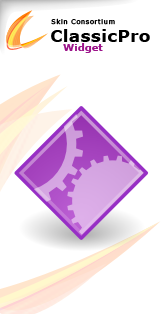
<style>
.page{position:relative;width:164px;height:314px;background:#ffffff}
.page>*{position:absolute;margin:0}
.t1{font:6.5px "Verdana";letter-spacing:0.1em;color:#010101}
.t2{font:17.4px "Verdana-Bold";color:#000000}
.t3{font:10px "Verdana-Bold";color:#9c148a}
</style>
<div class="page">
<p class="t1" style="left:51px;top:18px;width:64px;height:7px">Skin Consortium</p>
<p class="t2" style="left:51px;top:29px;width:99px;height:13px">ClassicPro</p>
<p class="t3" style="left:63px;top:43px;width:40px;height:10px">Widget</p>
</div>
